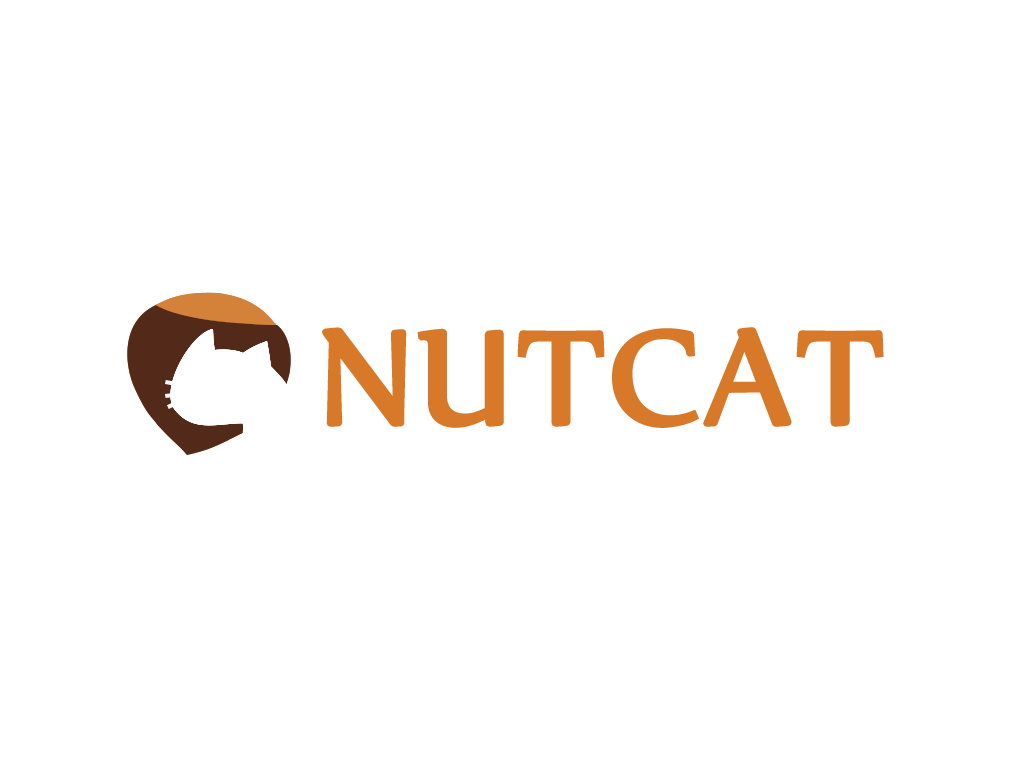
<style>
.page{position:relative;width:1024px;height:768px;background:#ffffff}
.page>*{position:absolute;margin:0}
.t1{font:160px "Nyala-Regular";color:#d77929;font-weight:bold}
</style>
<div class="page">
<p class="t1" style="left:322px;top:327px;width:562px;height:101px">NUTCAT</p>
</div>
